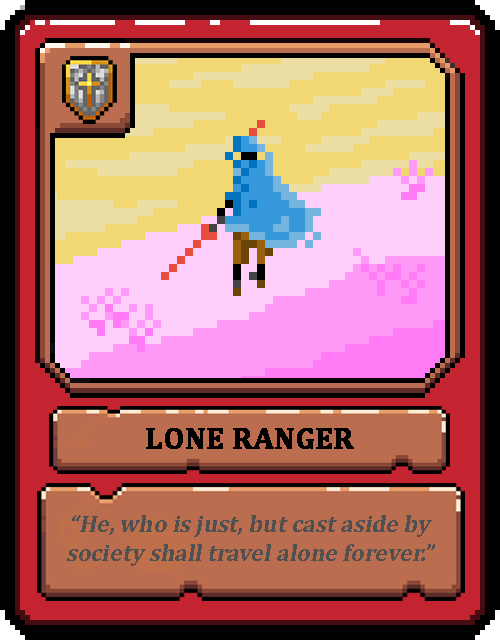
<style>
.page{position:relative;width:500px;height:640px}
.page>*{position:absolute;margin:0}
.t1{font:30px "Cambria-Bold";color:#000000;text-transform:uppercase;font-weight:bold}
.t2{font:24px "Cambria-Bold";color:#505050;font-style:italic}
</style>
<div class="page">
<p class="t1" style="left:146px;top:428px;width:208px;height:21px">Lone Ranger</p>
<p class="t2" style="left:67px;top:515px;width:368px;height:51px;text-align:center">“He, who is just, but cast aside by society shall travel alone forever.”</p>
</div>
